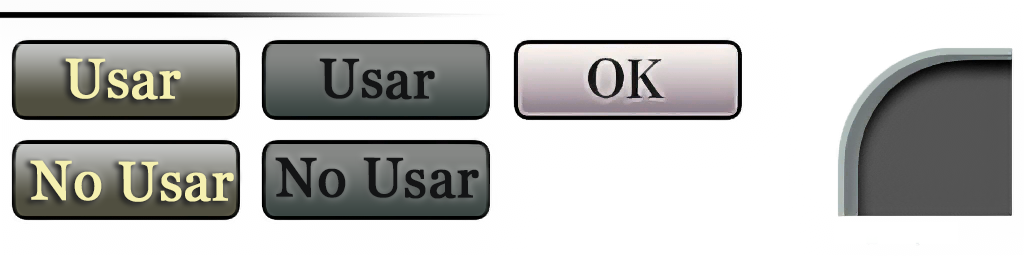
<style>
.page{position:relative;width:1024px;height:256px;background:#ffffff}
.page>*{position:absolute;margin:0}
.t1{font:55.6px "Georgia";color:#f5f0b0;font-weight:bold;scale:0.96 1}
.t2{font:55.6px "Georgia";color:#131415;font-weight:bold;scale:0.96 1}
</style>
<div class="page">
<p class="t1" style="left:65px;top:58px;width:116px;height:42px">Usar</p>
<p class="t2" style="left:319px;top:58px;width:116px;height:42px">Usar</p>
<p class="t1" style="left:30px;top:160px;width:204px;height:42px">No Usar</p>
<p class="t2" style="left:275px;top:157px;width:204px;height:42px">No Usar</p>
</div>
